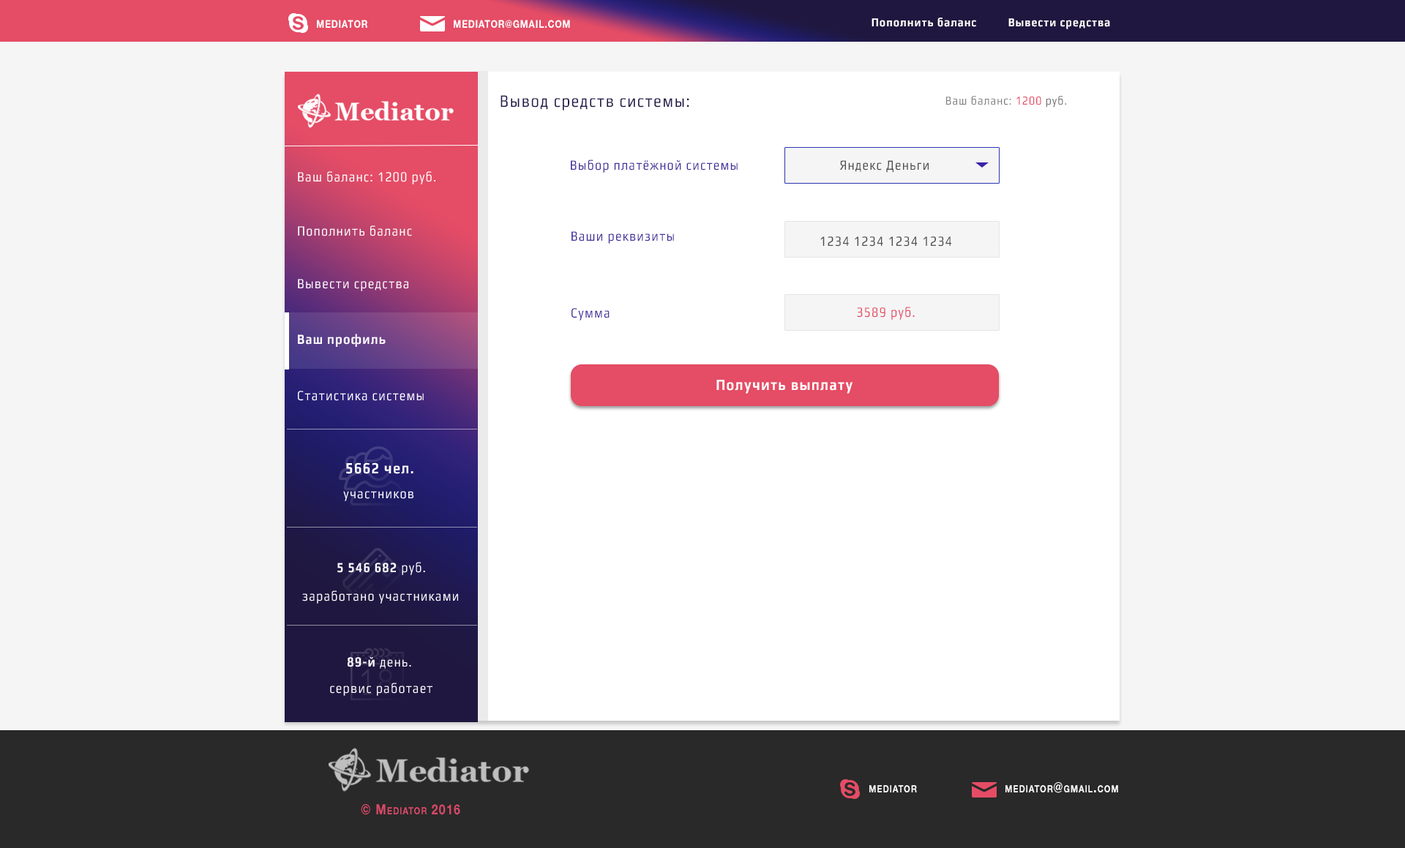
<style>
.page{position:relative;width:1405px;height:848px;background:#f5f5f5}
.page>*{position:absolute;margin:0}
.t1{font:12.3px "Play-Bold";letter-spacing:0.075em;color:#ffffff;scale:0.83 1}
.t2{font:10.5px "HelveticaNeueCyr-Bold";letter-spacing:0.075em;color:#ffffff;scale:0.83 1}
.t3{font:17.6px "Play";letter-spacing:0.075em;color:#1f194a;scale:0.83 1}
.t4{font:12.3px "Play";letter-spacing:0.075em;color:#808080;scale:0.83 1}
.t5{font:12.3px "Play";letter-spacing:0.075em;color:#e54c65;scale:0.83 1}
.t6{font:12.3px "Play";letter-spacing:0.075em;color:#717171;scale:0.83 1}
.t7{font:14.1px "Play";letter-spacing:0.075em;color:#42319d;scale:0.83 1}
.t8{font:14.1px "Play";letter-spacing:0.075em;color:#4d4d4d;scale:0.83 1}
.t9{font:14.1px "Play";letter-spacing:0.075em;color:#ffffff;scale:0.83 1}
.t10{font:14.1px "Play";letter-spacing:0.075em;color:#e54c65;scale:0.83 1}
.t11{font:14.1px "Play-Bold";letter-spacing:0.075em;color:#ffffff;scale:0.83 1}
.t12{font:15.8px "Play-Bold";letter-spacing:0.075em;color:#ffffff;scale:0.83 1}
.t13{font:14.1px "HelveticaNeueCyr-Bold";letter-spacing:0.075em;color:#ffffff;font-variant:small-caps;scale:0.83 1}
.t14{font:14.1px "HelveticaNeueCyr-Bold";letter-spacing:0.075em;color:#d64968;font-variant:small-caps;scale:0.83 1}
</style>
<div class="page">
<p class="t1" style="left:872px;top:18px;width:105px;height:9px">Пополнить баланс</p>
<p class="t2" style="left:317px;top:20px;width:50px;height:8px">MEDIATOR</p>
<p class="t2" style="left:454px;top:20px;width:116px;height:8px">MEDIATOR@GMAIL.COM</p>
<p class="t1" style="left:1009px;top:18px;width:101px;height:11px">Вывести средства</p>
<p class="t3" style="left:501px;top:95px;width:189px;height:16px">Вывод средств системы:</p>
<p class="t4" style="left:947px;top:96px;width:120px;height:12px">Ваш баланс: <span class="t5">1200 </span><span class="t6">руб.</span></p>
<p class="t7" style="left:571px;top:160px;width:167px;height:13px">Выбор платёжной системы</p>
<p class="t8" style="left:840px;top:160px;width:89px;height:13px">Яндекс Деньги</p>
<p class="t9" style="left:298px;top:171px;width:138px;height:13px">Ваш баланс: 1200 руб.</p>
<p class="t9" style="left:298px;top:225px;width:114px;height:11px">Пополнить баланс</p>
<p class="t7" style="left:572px;top:231px;width:102px;height:13px">Ваши реквизиты</p>
<p class="t8" style="left:821px;top:236px;width:131px;height:11px">1234 1234 1234 1234</p>
<p class="t9" style="left:298px;top:279px;width:110px;height:12px">Вывести средства</p>
<p class="t7" style="left:572px;top:308px;width:38px;height:13px">Сумма</p>
<p class="t10" style="left:857px;top:307px;width:58px;height:13px">3589 руб.</p>
<p class="t11" style="left:298px;top:334px;width:88px;height:13px">Ваш профиль</p>
<p class="t12" style="left:717px;top:380px;width:136px;height:14px">Получить выплату</p>
<p class="t9" style="left:298px;top:391px;width:126px;height:10px">Статистика системы</p>
<p class="t12" style="left:346px;top:463px;width:68px;height:11px">5662 чел.</p>
<p class="t9" style="left:343px;top:491px;width:71px;height:10px">участников</p>
<p class="t11" style="left:337px;top:562px;width:88px;height:13px">5 546 682<span class="t9"> руб.</span></p>
<p class="t9" style="left:302px;top:591px;width:156px;height:13px">заработано участниками</p>
<p class="t9" style="left:348px;top:657px;width:63px;height:12px"><span class="t11">89-й</span> день.</p>
<p class="t9" style="left:330px;top:683px;width:103px;height:13px">сервис работает</p>
<p class="t13" style="left:870px;top:785px;width:47px;height:8px">mediator</p>
<p class="t13" style="left:1006px;top:783px;width:113px;height:11px">mediator@gmail.com</p>
<p class="t14" style="left:361px;top:804px;width:99px;height:11px">© Mediator 2016</p>
</div>
